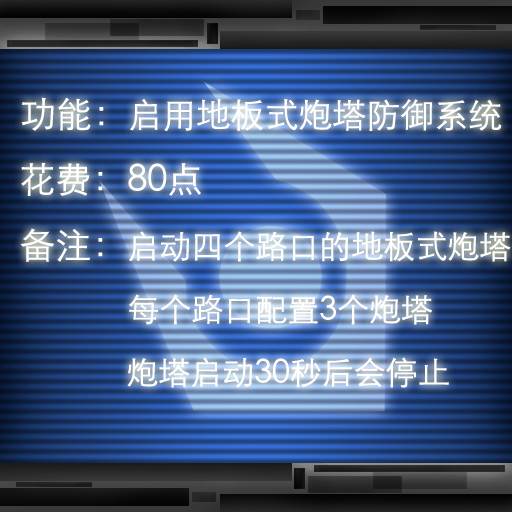
<style>
.page{position:relative;width:512px;height:512px}
.page>*{position:absolute;margin:0}
.t1{font:34px "STXihei";color:#ffffff}
.t2{font:36px "STXihei";color:#ffffff}
.t3{font:32px "STXihei";color:#ffffff}
</style>
<div class="page">
<p class="t1" style="left:21px;top:97px;width:481px;height:35px"><span class="t2">功能：</span>启用地板式炮塔防御系统</p>
<p class="t2" style="left:21px;top:163px;width:180px;height:33px">花费：80点</p>
<p class="t3" style="left:20px;top:228px;width:491px;height:160px"><span class="t2">备注：</span>启动四个路口的地板式炮塔<br>            每个路口配置3个炮塔<br>            炮塔启动30秒后会停止</p>
</div>
